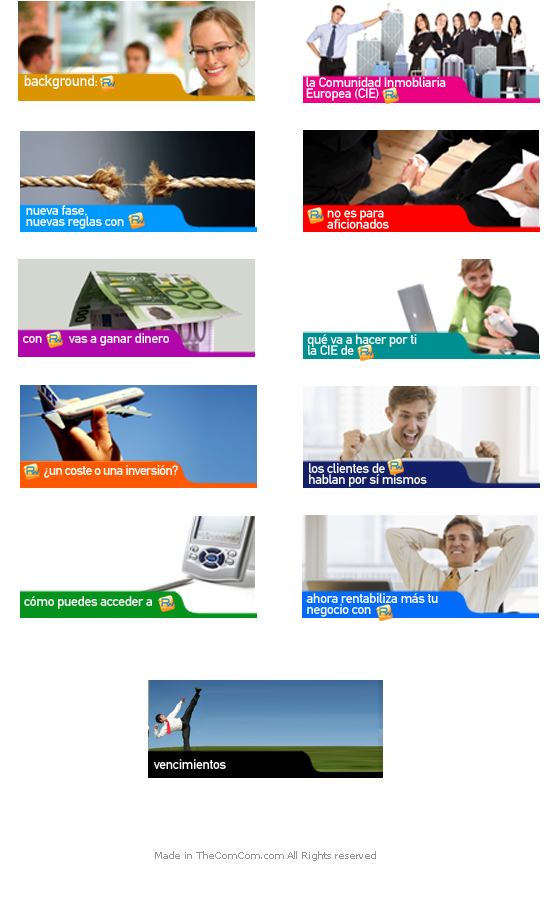
<style>
.page{position:relative;width:555px;height:908px;background:#ffffff}
.page>*{position:absolute;margin:0}
.t1{font:15px "DINMittelschriftStd";letter-spacing:-0.025em;color:#ffffff}
.t2{font:13.8px/11.2px "DINMittelschriftStd";letter-spacing:-0.025em;color:#ffffff}
.t3{font:13.8px "DINMittelschriftStd";letter-spacing:-0.025em;color:#ffffff}
.t4{font:13.8px "DINMittelschriftStd";letter-spacing:-0.05em;color:#ffffff}
.t5{font:10px "MSReferenceSansSerif";letter-spacing:-0.025em;color:#979595}
</style>
<div class="page">
<p class="t1" style="left:24px;top:75px;width:73px;height:14px">background:</p>
<p class="t2" style="left:306px;top:77px;width:140px;height:24px">la Comunidad Inmobliaria <br>Europea (CIE)</p>
<p class="t2" style="left:26px;top:205px;width:98px;height:24px">nueva fase, <br>nuevas reglas con</p>
<p class="t2" style="left:327px;top:210px;width:62px;height:19px">no es para<br>      aficionados</p>
<p class="t3" style="left:23px;top:333px;width:146px;height:13px">con         vas a ganar dinero</p>
<p class="t2" style="left:307px;top:334px;width:110px;height:21px">qué va a hacer por ti<br>la CIE de</p>
<p class="t4" style="left:44px;top:465px;width:134px;height:13px">¿un coste o una inversión?</p>
<p class="t2" style="left:309px;top:463px;width:118px;height:24px">los clientes de<br>hablan por sí mismos</p>
<p class="t2" style="left:306px;top:593px;width:132px;height:24px">ahora rentabiliza más tu negocio con</p>
<p class="t3" style="left:24px;top:596px;width:128px;height:13px">cómo puedes acceder a</p>
<p class="t3" style="left:153px;top:759px;width:73px;height:10px">vencimientos</p>
<p class="t5" style="left:155px;top:851px;width:221px;height:10px">Made in TheComCom.com All Rights reserved</p>
</div>
